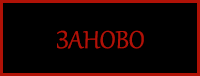
<style>
.page{position:relative;width:200px;height:76px;background:#000000}
.page>*{position:absolute;margin:0}
.t1{font:30px "Gabriola";color:#b01207;text-transform:uppercase}
</style>
<div class="page">
<p class="t1" style="left:57px;top:30px;width:87px;height:19px">Заново</p>
</div>
